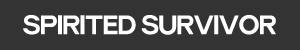
<style>
.page{position:relative;width:300px;height:50px;background:#333333}
.page>*{position:absolute;margin:0}
.t1{font:29.9px "Pentatonic";letter-spacing:-0.05em;color:#ffffff;font-weight:bold}
</style>
<div class="page">
<p class="t1" style="left:23px;top:15px;width:253px;height:20px">SPIRITED SURVIVOR</p>
</div>
